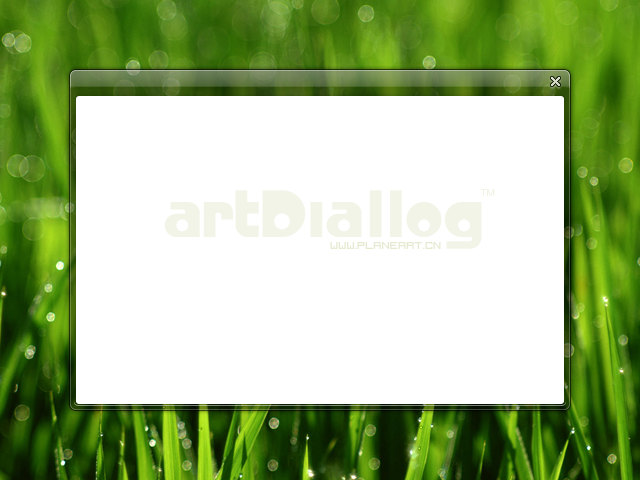
<style>
.page{position:relative;width:640px;height:480px;background:#ffffff}
.page>*{position:absolute;margin:0}
.t1{font:72px "CrystalRadioKit";color:#f2f4e8}
.t2{font:9px "MicrosoftYaHei";color:#f1f3e5}
.t3{font:12px "IgnisetGlaciesSharp";color:#e5e9cf}
</style>
<div class="page">
<p class="t1" style="left:164px;top:190px;width:318px;height:59px">artDiallog</p>
<p class="t2" style="left:481px;top:189px;width:14px;height:7px">TM</p>
<p class="t3" style="left:330px;top:242px;width:111px;height:7px">www.planeart.cn</p>
</div>
